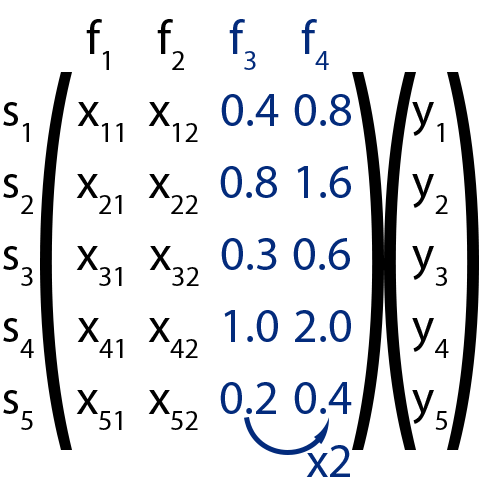
<style>
.page{position:relative;width:480px;height:480px;background:#ffffff}
.page>*{position:absolute;margin:0}
.t1{font:48px "MyriadPro-Regular";color:#000000}
.t2{font:48px "MyriadPro-Regular";color:#000000;font-variant:small-caps}
.t3{font:48px "MyriadPro-Regular";color:#032b7c}
.t4{font:48px "MyriadPro-Regular";color:#032b7c;font-variant:small-caps}
</style>
<div class="page">
<p class="t1" style="left:86px;top:19px;width:23px;height:51px">f<span class="t2">1</span></p>
<p class="t1" style="left:157px;top:19px;width:27px;height:51px">f2</p>
<p class="t3" style="left:229px;top:19px;width:27px;height:51px">f<span class="t4">3</span></p>
<p class="t3" style="left:301px;top:19px;width:28px;height:51px">f<span class="t4">4</span></p>
<p class="t1" style="left:3px;top:102px;width:26px;height:40px">s<span class="t2">1</span></p>
<p class="t2" style="left:77px;top:102px;width:46px;height:40px"><span class="t1">x</span>11</p>
<p class="t2" style="left:148px;top:102px;width:50px;height:40px"><span class="t1">x</span>12</p>
<p class="t3" style="left:221px;top:94px;width:58px;height:32px">0.4</p>
<p class="t3" style="left:294px;top:94px;width:57px;height:32px">0.8</p>
<p class="t1" style="left:412px;top:102px;width:32px;height:40px">y<span class="t2">1</span></p>
<p class="t1" style="left:3px;top:174px;width:30px;height:40px">s<span class="t2">2</span></p>
<p class="t2" style="left:76px;top:174px;width:46px;height:40px"><span class="t1">x</span>21</p>
<p class="t2" style="left:148px;top:174px;width:50px;height:40px"><span class="t1">x</span>22</p>
<p class="t3" style="left:220px;top:166px;width:57px;height:32px">0.8</p>
<p class="t3" style="left:297px;top:166px;width:54px;height:32px">1.6</p>
<p class="t1" style="left:412px;top:174px;width:36px;height:40px">y<span class="t2">2</span></p>
<p class="t1" style="left:3px;top:246px;width:30px;height:40px">s<span class="t2">3</span></p>
<p class="t2" style="left:76px;top:246px;width:46px;height:40px"><span class="t1">x</span>31</p>
<p class="t2" style="left:149px;top:246px;width:50px;height:40px"><span class="t1">x</span>32</p>
<p class="t3" style="left:221px;top:238px;width:56px;height:32px">0.3</p>
<p class="t3" style="left:293px;top:238px;width:57px;height:32px">0.6</p>
<p class="t1" style="left:412px;top:246px;width:35px;height:40px">y<span class="t2">3</span></p>
<p class="t1" style="left:3px;top:318px;width:31px;height:40px">s<span class="t2">4</span></p>
<p class="t2" style="left:77px;top:318px;width:46px;height:40px"><span class="t1">x</span>41</p>
<p class="t2" style="left:148px;top:318px;width:50px;height:40px"><span class="t1">x</span>42</p>
<p class="t3" style="left:224px;top:310px;width:54px;height:32px">1.0</p>
<p class="t3" style="left:295px;top:310px;width:56px;height:32px">2.0</p>
<p class="t1" style="left:412px;top:318px;width:37px;height:40px">y<span class="t2">4</span></p>
<p class="t1" style="left:3px;top:390px;width:30px;height:40px">s5</p>
<p class="t2" style="left:76px;top:390px;width:46px;height:40px"><span class="t1">x</span>51</p>
<p class="t2" style="left:148px;top:390px;width:50px;height:40px"><span class="t1">x</span>52</p>
<p class="t3" style="left:220px;top:382px;width:56px;height:32px">0.2</p>
<p class="t3" style="left:294px;top:382px;width:58px;height:32px">0.4</p>
<p class="t1" style="left:412px;top:390px;width:35px;height:40px">y<span class="t2">5</span></p>
<p class="t3" style="left:306px;top:445px;width:44px;height:32px">x2</p>
</div>
